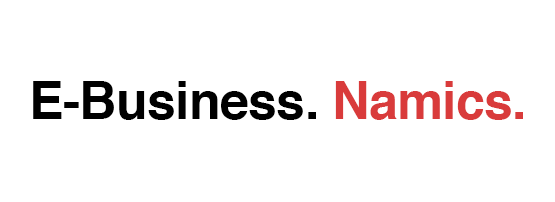
<style>
.page{position:relative;width:555px;height:202px;background:#ffffff}
.page>*{position:absolute;margin:0}
.t1{font:52.1px "Helvetica-Bold";letter-spacing:-0.014em;color:#000000}
.t2{font:52.1px "Helvetica-Bold";letter-spacing:-0.014em;color:#d93b3b}
</style>
<div class="page">
<p class="t1" style="left:33px;top:81px;width:490px;height:39px">E-Business. <span class="t2">Namics.</span></p>
</div>
